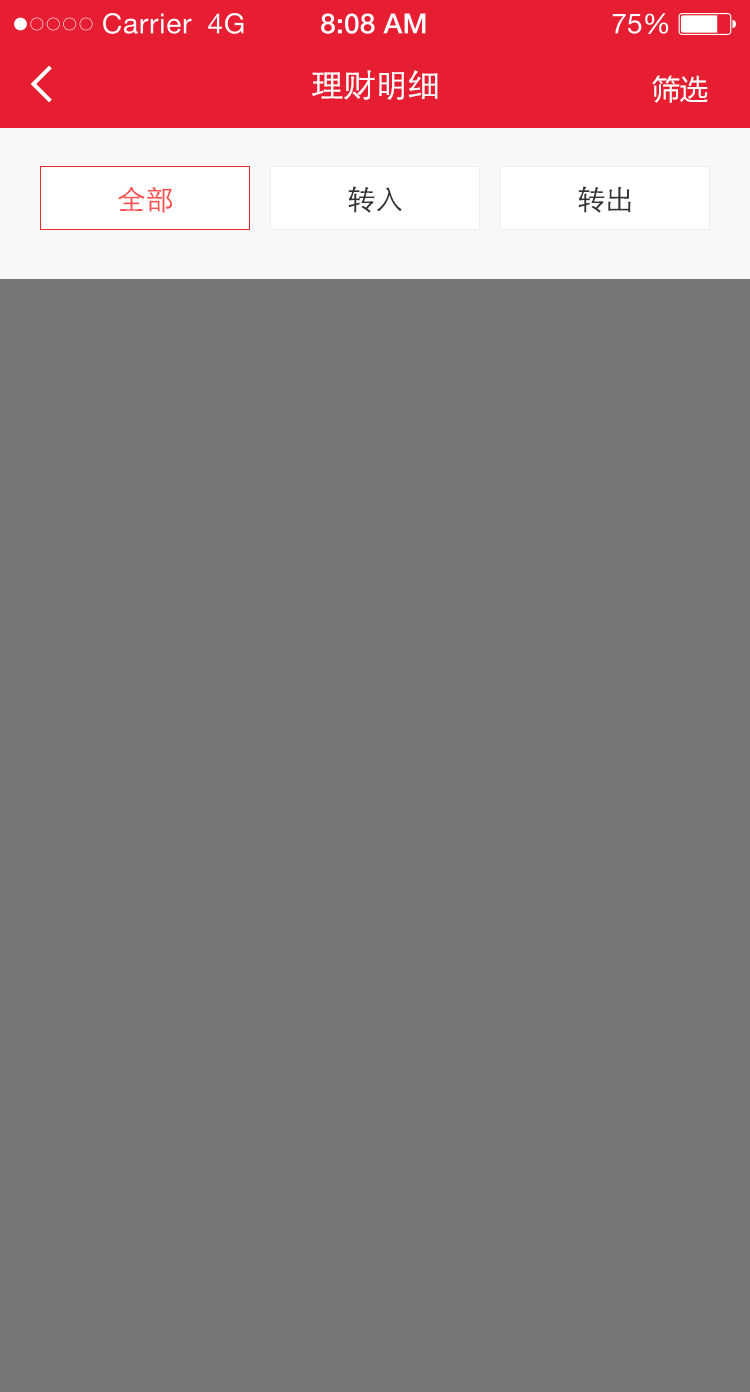
<style>
.page{position:relative;width:750px;height:1392px;background:#777777}
.page>*{position:absolute;margin:0}
.t1{font:32px "STXihei";color:#ffffff}
.t2{font:28px "MicrosoftYaHei";color:#ffffff}
.t3{font:28px "STXihei";color:#ff5050}
.t4{font:28px "STXihei";color:#333333}
</style>
<div class="page">
<p class="t1" style="left:312px;top:70px;width:126px;height:30px">理财明细</p>
<p class="t2" style="left:652px;top:75px;width:56px;height:28px">筛选</p>
<p class="t3" style="left:118px;top:186px;width:54px;height:27px">全部</p>
<p class="t4" style="left:348px;top:186px;width:54px;height:27px">转入</p>
<p class="t4" style="left:578px;top:186px;width:53px;height:27px">转出</p>
</div>
